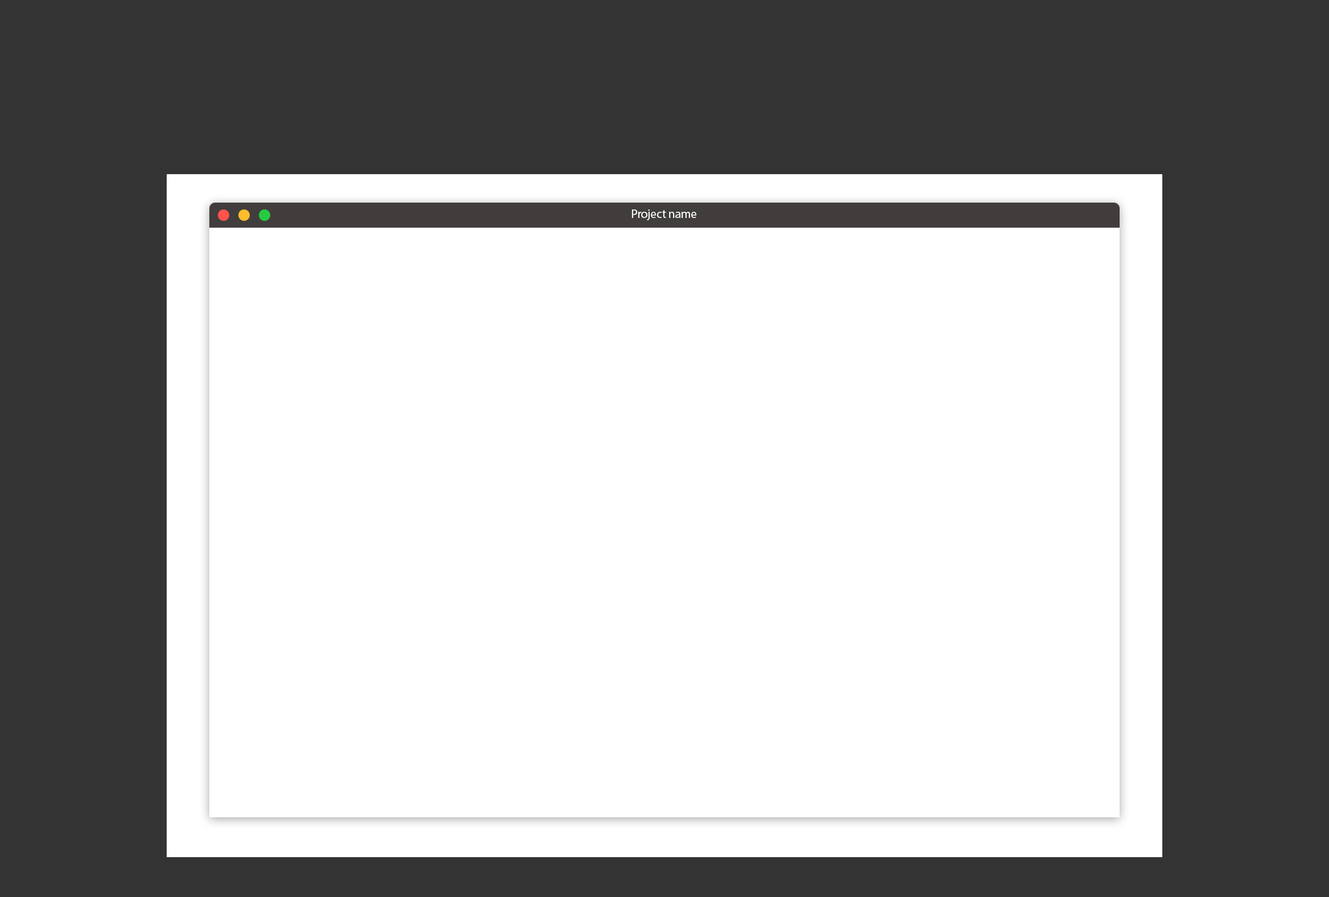
<style>
.page{position:relative;width:1329px;height:897px;background:#ffffff}
.page>*{position:absolute;margin:0}
.t1{font:12px "MyriadPro-Regular";color:#ffffff}
</style>
<div class="page">
<p class="t1" style="left:632px;top:209px;width:65px;height:11px">Project name</p>
</div>
